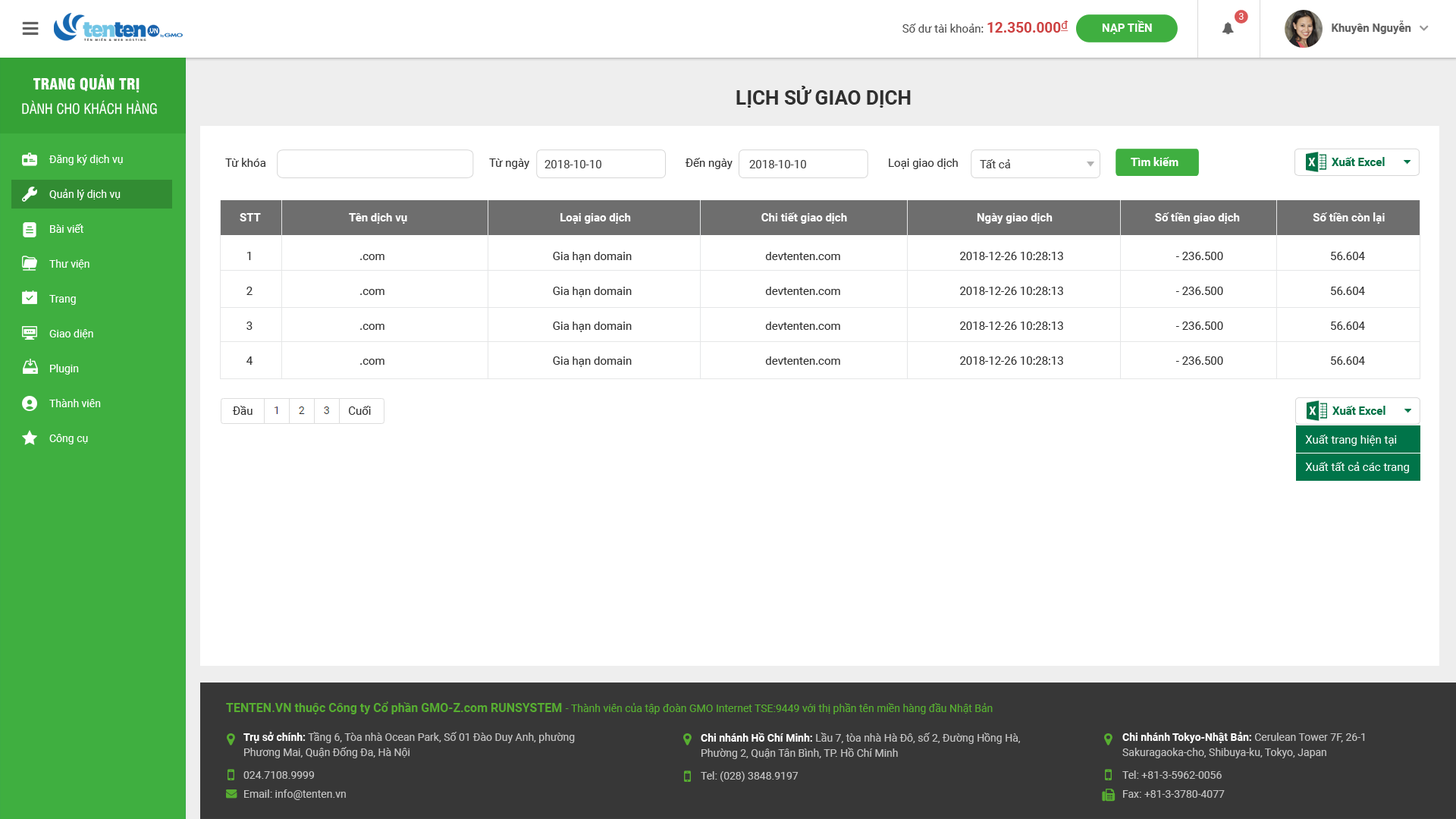
<style>
.page{position:relative;width:1456px;height:819px;background:#ffffff}
.page>*{position:absolute;margin:0}
.t1{font:9.1px "Roboto-Regular";color:#ffffff;text-transform:uppercase}
.t2{font:11.4px "Roboto-Regular";color:#4e4e4e}
.t3{font:14.4px "Roboto-Bold";color:#cd4141}
.t4{font:11.4px "Roboto-Regular";color:#cd4141;text-decoration:underline}
.t5{font:11.4px "Roboto-Bold";color:#ffffff}
.t6{font:11.4px "Roboto-Bold";color:#616161}
.t7{font:15.2px "UTM-Swiss-721-Black-Condensed";color:#ffffff;text-transform:uppercase}
.t8{font:19.7px "Roboto-Bold";color:#303030;text-transform:uppercase}
.t9{font:13.6px "UTM-Swiss-Condensed";color:#ffffff;text-transform:uppercase}
.t10{font:10.6px/34.9px "Roboto-Regular";color:#ffffff}
.t11{font:11.4px "Roboto-Regular";color:#303030}
.t12{font:11.4px "Roboto-Regular";color:#3e3e3e}
.t13{font:11.4px "Roboto-Bold";color:#007246}
.t14{font:11.4px/34.9px "Roboto-Regular";color:#303030}
.t15{font:11.4px/27.3px "Roboto-Regular";color:#ffffff}
.t16{font:10.6px "Roboto-Regular";color:#57ae31}
.t17{font:12.1px "Roboto-Bold";color:#57ae31}
.t18{font:10.6px/15.2px "Roboto-Regular";color:#c4c4c4}
.t19{font:10.6px/15.2px "Roboto-Bold";color:#ffffff}
.t20{font:10.6px/22.7px "Roboto-Regular";color:#c4c4c4}
.t21{font:10.6px/19px "Roboto-Regular";color:#c4c4c4}
</style>
<div class="page">
<p class="t1" style="left:1238px;top:13px;width:6px;height:7px">3</p>
<p class="t2" style="left:902px;top:20px;width:166px;height:13px">Số dư tài khoản: <span class="t3">12.350.000</span><span class="t4">đ</span></p>
<p class="t5" style="left:1102px;top:20px;width:50px;height:14px">NẠP TIỀN</p>
<p class="t6" style="left:1332px;top:20px;width:79px;height:14px">Khuyên Nguyễn</p>
<p class="t7" style="left:33px;top:74px;width:107px;height:19px">Trang quản trị</p>
<p class="t8" style="left:736px;top:86px;width:175px;height:22px">lịch sử giao dịch</p>
<p class="t9" style="left:22px;top:100px;width:135px;height:15px">Dành cho Khách hàng</p>
<p class="t10" style="left:49px;top:155px;width:74px;height:289px">Đăng ký dịch vụ<br>Quản lý dịch vụ<br>Bài viết<br>Thư viện<br>Trang<br>Giao diện<br>Plugin<br>Thành viên<br>Công cụ</p>
<p class="t11" style="left:225px;top:158px;width:41px;height:9px">Từ khóa</p>
<p class="t11" style="left:489px;top:158px;width:40px;height:11px">Từ ngày</p>
<p class="t12" style="left:544px;top:160px;width:57px;height:8px">2018-10-10</p>
<p class="t11" style="left:685px;top:158px;width:48px;height:11px">Đến ngày</p>
<p class="t12" style="left:749px;top:160px;width:57px;height:8px">2018-10-10</p>
<p class="t11" style="left:889px;top:158px;width:69px;height:11px">Loại giao dịch</p>
<p class="t12" style="left:980px;top:159px;width:31px;height:9px">Tất cả</p>
<p class="t5" style="left:1131px;top:157px;width:47px;height:9px">Tìm kiếm</p>
<p class="t13" style="left:1332px;top:157px;width:53px;height:9px">Xuất Excel</p>
<p class="t5" style="left:240px;top:212px;width:1145px;height:12px">STT    Tên dịch vụ            Loại giao dịch      Chi tiết giao dịch     Ngày giao dịch         Số tiền giao dịch        Số tiền còn lại</p>
<p class="t14" style="left:246px;top:252px;width:7px;height:113px;text-align:center">1<br>2<br>3<br>4</p>
<p class="t14" style="left:360px;top:254px;width:24px;height:111px;text-align:center">.com<br>.com<br>.com<br>.com</p>
<p class="t14" style="left:553px;top:252px;width:79px;height:115px;text-align:center">Gia hạn domain<br>Gia hạn domain<br>Gia hạn domain<br>Gia hạn domain</p>
<p class="t14" style="left:765px;top:252px;width:75px;height:113px;text-align:center">devtenten.com<br>devtenten.com<br>devtenten.com<br>devtenten.com</p>
<p class="t14" style="left:960px;top:252px;width:103px;height:113px;text-align:center">2018-12-26 10:28:13<br>2018-12-26 10:28:13<br>2018-12-26 10:28:13<br>2018-12-26 10:28:13</p>
<p class="t14" style="left:1175px;top:252px;width:48px;height:113px;text-align:center">- 236.500<br>- 236.500<br>- 236.500<br>- 236.500</p>
<p class="t14" style="left:1331px;top:252px;width:34px;height:113px;text-align:center">56.604<br>56.604<br>56.604<br>56.604</p>
<p class="t11" style="left:232px;top:406px;width:21px;height:9px">Đầu</p>
<p class="t11" style="left:349px;top:406px;width:22px;height:9px">Cuối</p>
<p class="t13" style="left:1332px;top:406px;width:53px;height:9px">Xuất Excel</p>
<p class="t15" style="left:1305px;top:435px;width:104px;height:38px">Xuất trang hiện tại<br>Xuất tất cả các trang</p>
<p class="t16" style="left:226px;top:701px;width:767px;height:13px"><span class="t17">TENTEN.VN thuộc Công ty Cổ phần GMO-Z.com RUNSYSTEM </span>- Thành viên của tập đoàn GMO Internet TSE:9449 với thị phần tên miền hàng đầu Nhật Bản</p>
<p class="t18" style="left:243px;top:732px;width:332px;height:68px"><span class="t19">Trụ sở chính:</span> Tầng 6, Tòa nhà Ocean Park, Số 01 Đào Duy Anh, phường Phương Mai, Quận Đống Đa, Hà Nội<br><span class="t20">024.7108.9999<br></span><span class="t21">Email: info@tenten.vn</span></p>
<p class="t18" style="left:701px;top:733px;width:319px;height:49px"><span class="t19">Chi nhánh Hồ Chí Minh: </span>Lầu 7, tòa nhà Hà Đô, số 2, Đường Hồng Hà, Phường 2, Quận Tân Bình, TP. Hồ Chí Minh<br><span class="t20">Tel: (028) 3848.9197</span></p>
<p class="t18" style="left:1122px;top:732px;width:243px;height:66px"><span class="t19">Chi nhánh Tokyo-Nhật Bản:</span> Cerulean Tower 7F, 26-1 Sakuragaoka-cho, Shibuya-ku, Tokyo, Japan <br><span class="t20">Tel: +81-3-5962-0056<br></span><span class="t21">Fax: +81-3-3780-4077</span></p>
</div>
